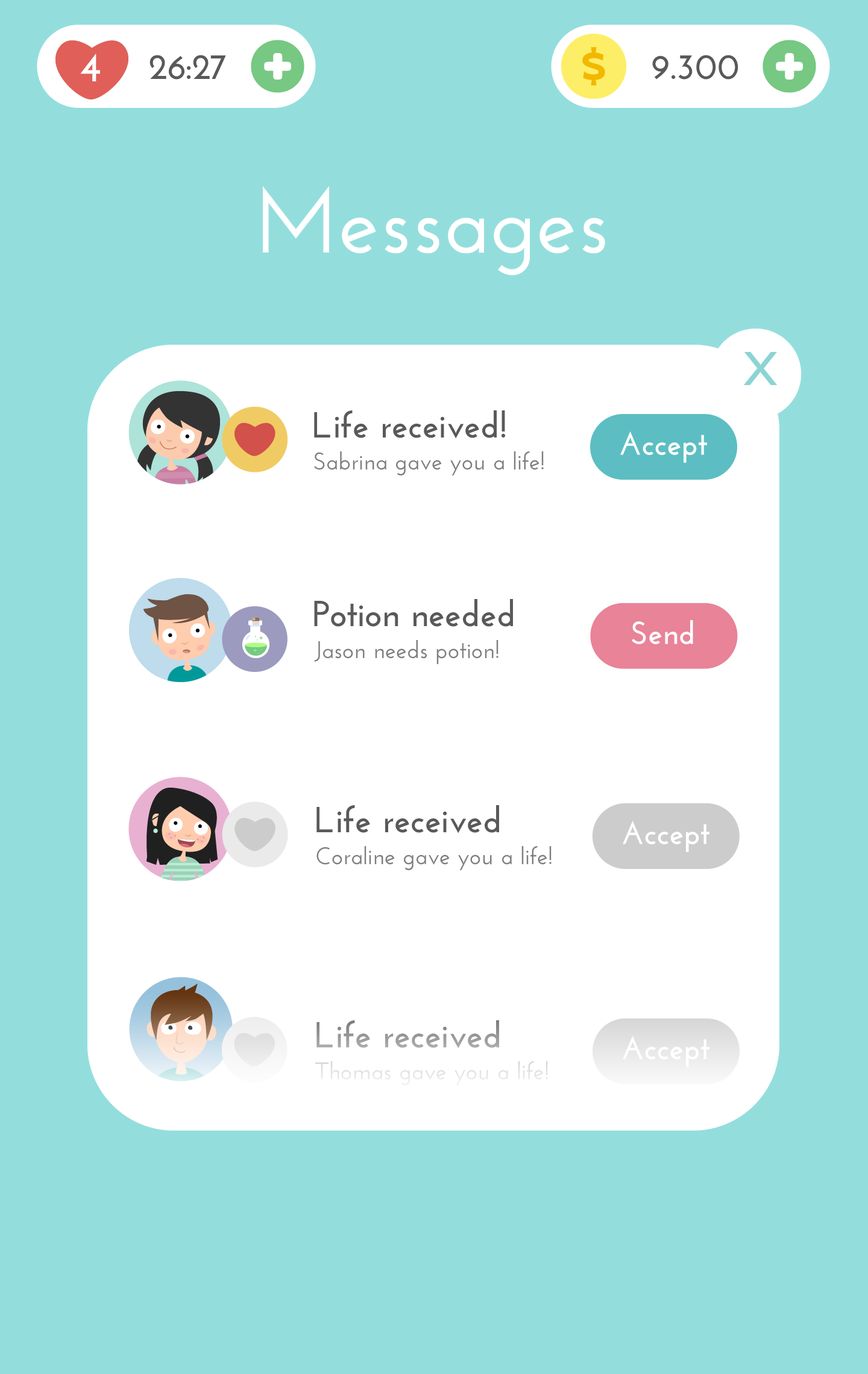
<style>
.page{position:relative;width:868px;height:1374px;background:#93dedd}
.page>*{position:absolute;margin:0}
.t1{font:42.2px "JosefinSans-Bold";color:#ffffff}
.t2{font:36.2px "JosefinSans-Bold";color:#595959}
.t3{font:90.4px "JosefinSans-SemiBold";color:#ffffff}
.t4{font:31.7px "JosefinSans-Bold";color:#ffffff}
.t5{font:24.1px "JosefinSans-SemiBold";color:#7e7e7e}
.t6{font:36.2px "JosefinSans-Bold";color:#9d9d9d}
.t7{font:24.1px "JosefinSans-SemiBold";color:#e4e4e4}
</style>
<div class="page">
<p class="t1" style="left:80px;top:54px;width:20px;height:27px">4</p>
<p class="t2" style="left:149px;top:55px;width:77px;height:25px">26:27</p>
<p class="t2" style="left:652px;top:55px;width:86px;height:25px">9.300</p>
<p class="t3" style="left:263px;top:186px;width:342px;height:89px">Messages</p>
<p class="t2" style="left:314px;top:410px;width:191px;height:29px">Life received!</p>
<p class="t4" style="left:620px;top:431px;width:87px;height:32px">Accept</p>
<p class="t5" style="left:314px;top:451px;width:230px;height:24px">Sabrina gave you a life!</p>
<p class="t2" style="left:314px;top:599px;width:199px;height:28px">Potion needed</p>
<p class="t4" style="left:632px;top:620px;width:61px;height:24px">Send</p>
<p class="t5" style="left:314px;top:640px;width:184px;height:24px">Jason needs potion!</p>
<p class="t2" style="left:316px;top:805px;width:183px;height:28px">Life received</p>
<p class="t4" style="left:623px;top:820px;width:86px;height:32px">Accept</p>
<p class="t5" style="left:316px;top:846px;width:235px;height:24px">Coraline gave you a life!</p>
<p class="t6" style="left:316px;top:1020px;width:183px;height:29px">Life received</p>
<p class="t4" style="left:623px;top:1035px;width:86px;height:32px">Accept</p>
<p class="t7" style="left:315px;top:1061px;width:233px;height:24px">Thomas gave you a life!</p>
</div>
